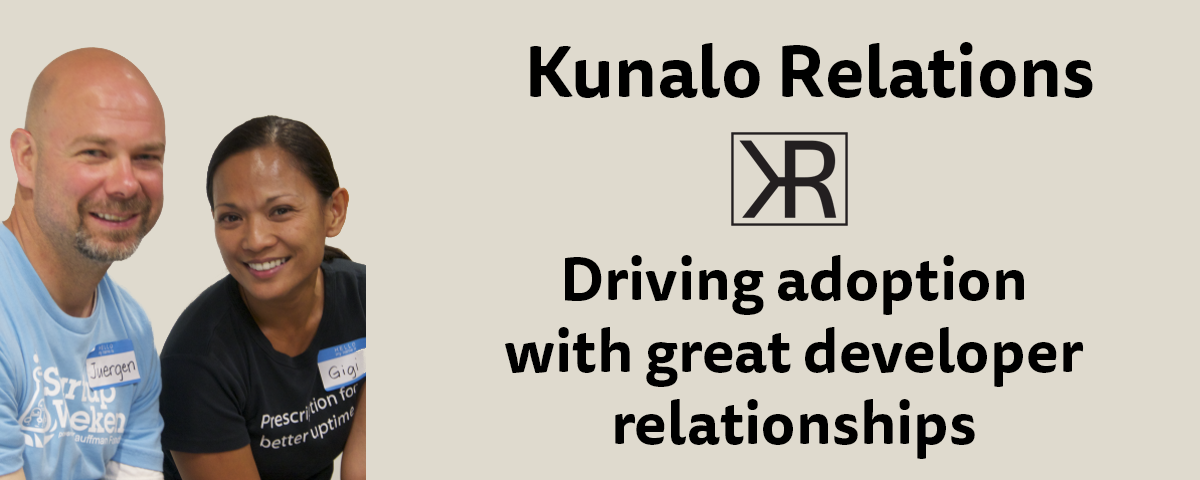
<style>
.page{position:relative;width:1200px;height:480px;background:#dfdace}
.page>*{position:absolute;margin:0}
.t1{font:72px "TisaSansPro-Bold";color:#000000}
.t2{font:60px "TisaSansPro-Bold";color:#000000}
</style>
<div class="page">
<p class="t1" style="left:530px;top:42px;width:563px;height:56px">Kunalo Relations</p>
<p class="t2" style="left:505px;top:255px;width:579px;height:204px;text-align:center">Driving adoption<br>with great developer<br>relationships</p>
</div>
